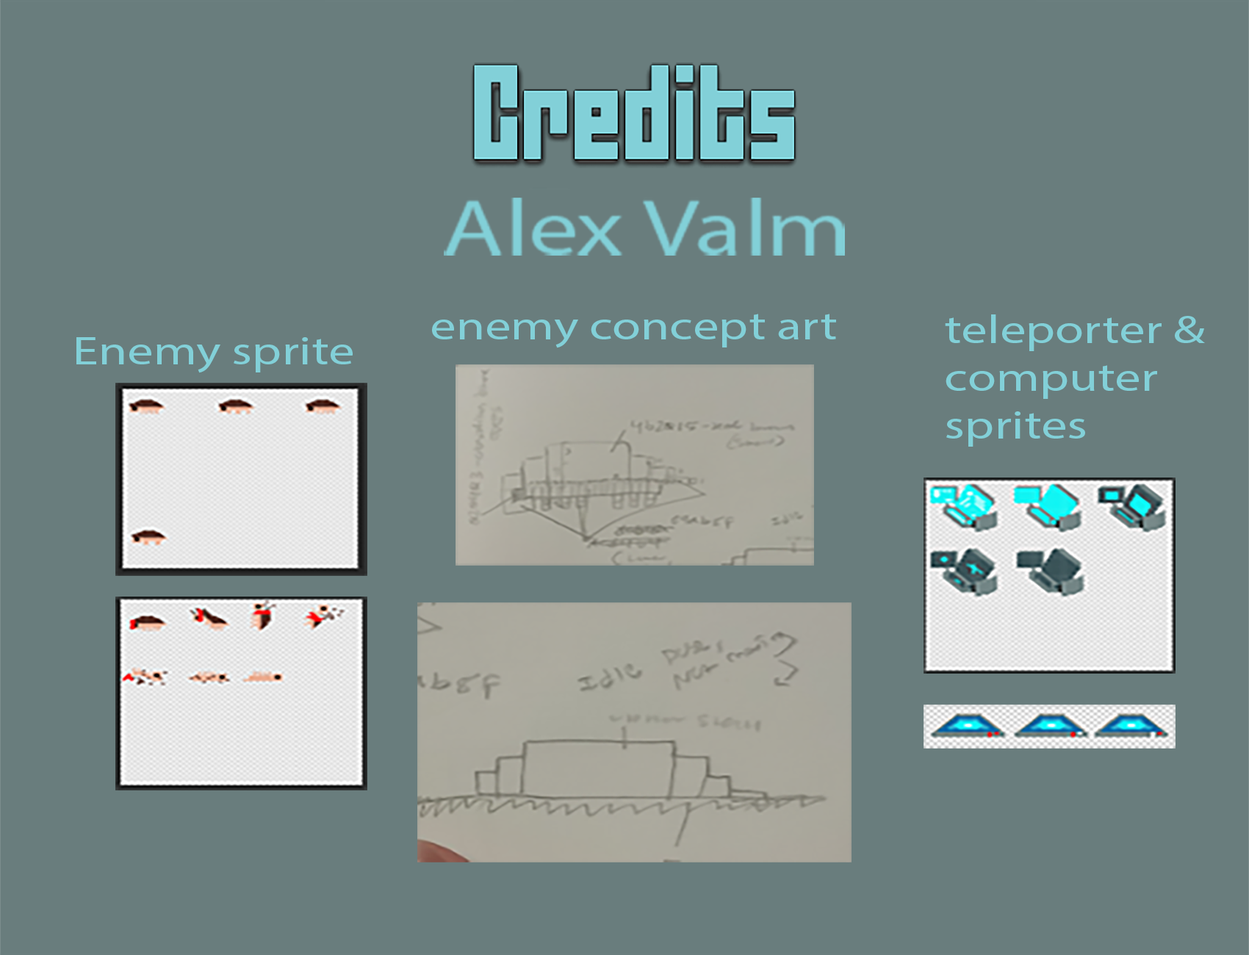
<style>
.page{position:relative;width:1249px;height:955px;background:#697d7d}
.page>*{position:absolute;margin:0}
.t1{font:39.8px "MyriadPro-Regular";color:#82d0d8;scale:1.31 1}
</style>
<div class="page">
<p class="t1" style="left:432px;top:314px;width:404px;height:34px">enemy concept art</p>
<p class="t1" style="left:945px;top:314px;width:260px;height:133px">teleporter &amp; computer sprites</p>
<p class="t1" style="left:76px;top:337px;width:277px;height:36px">Enemy sprite</p>
</div>
